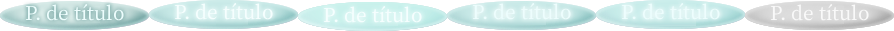
<style>
.page{position:relative;width:894px;height:31px;background:#ffffff}
.page>*{position:absolute;margin:0}
.t1{font:23px "OfficialFateFont-Medium";color:#edfdfd}
.t2{font:23px "OfficialFateFont-Medium";color:#f5fefe}
.t3{font:23px "OfficialFateFont-Medium";color:#f9f9f9}
</style>
<div class="page">
<p class="t1" style="left:25px;top:4px;width:99px;height:17px">P. de título</p>
<p class="t2" style="left:174px;top:3px;width:99px;height:17px">P. de título</p>
<p class="t2" style="left:323px;top:6px;width:99px;height:17px">P. de título</p>
<p class="t1" style="left:472px;top:3px;width:99px;height:17px">P. de título</p>
<p class="t1" style="left:621px;top:3px;width:99px;height:17px">P. de título</p>
<p class="t3" style="left:770px;top:4px;width:99px;height:17px">P. de título</p>
</div>
